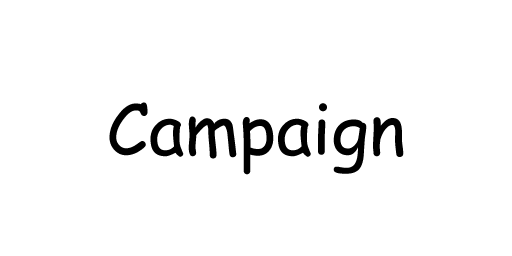
<style>
.page{position:relative;width:512px;height:256px;background:#ffffff}
.page>*{position:absolute;margin:0}
.t1{font:70px "MyriadPro-Regular";color:#000000}
.t2{font:70px "ComicSansMS";color:#000000}
</style>
<div class="page">
<p class="t1" style="left:109px;top:102px;width:295px;height:73px;text-align:center"><span class="t2">Campaign<br></span>campaign<br>campaign<br>campaign</p>
</div>
